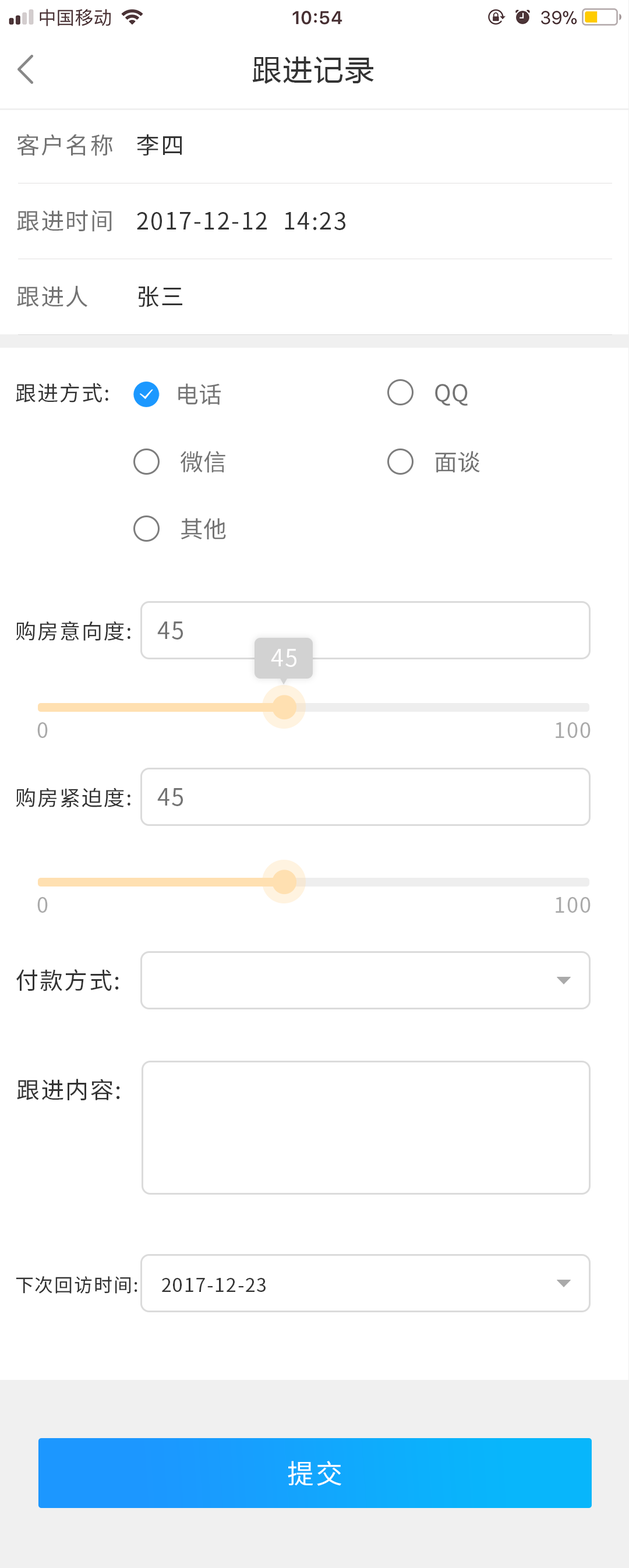
<style>
.page{position:relative;width:629px;height:1568px;background:#ffffff}
.page>*{position:absolute;margin:0}
.t1{font:29.1px "MicrosoftYaHei";letter-spacing:0.06em;color:#333333}
.t2{font:23.3px "SourceHanSansCN-Regular";letter-spacing:0.06em;color:#737373}
.t3{font:23.3px "SourceHanSansCN-Regular";letter-spacing:0.06em;color:#333333}
.t4{font:21px "SourceHanSansCN-Regular";letter-spacing:0.06em;color:#333333}
.t5{font:23.3px "SourceHanSansCN-Regular";color:#737373}
.t6{font:23.3px "SourceHanSansCN-Regular";letter-spacing:0.06em;color:#fffefe}
.t7{font:21px "SourceHanSansCN-Regular";letter-spacing:0.06em;color:#aaaaaa}
.t8{font:18.6px "SourceHanSansCN-Regular";letter-spacing:0.06em;color:#333333}
.t9{font:26.8px "SourceHanSansCN-Regular";letter-spacing:0.06em;color:#ffffff}
</style>
<div class="page">
<p class="t1" style="left:252px;top:56px;width:122px;height:28px">跟进记录</p>
<p class="t2" style="left:17px;top:134px;width:95px;height:22px">客户名称</p>
<p class="t3" style="left:137px;top:134px;width:45px;height:22px">李四</p>
<p class="t2" style="left:17px;top:210px;width:95px;height:22px">跟进时间</p>
<p class="t3" style="left:137px;top:212px;width:208px;height:18px">2017-12-12  14:23</p>
<p class="t2" style="left:17px;top:285px;width:70px;height:22px">跟进人</p>
<p class="t3" style="left:138px;top:286px;width:44px;height:22px">张三</p>
<p class="t4" style="left:16px;top:383px;width:92px;height:19px">跟进方式:</p>
<p class="t5" style="left:178px;top:383px;width:43px;height:22px">电话</p>
<p class="t5" style="left:435px;top:384px;width:33px;height:22px">QQ</p>
<p class="t5" style="left:180px;top:451px;width:45px;height:22px">微信</p>
<p class="t5" style="left:435px;top:451px;width:45px;height:21px">面谈</p>
<p class="t5" style="left:181px;top:518px;width:45px;height:21px">其他</p>
<p class="t4" style="left:16px;top:621px;width:114px;height:20px">购房意向度:</p>
<p class="t2" style="left:157px;top:621px;width:26px;height:19px">45</p>
<p class="t6" style="left:271px;top:649px;width:25px;height:18px">45</p>
<p class="t7" style="left:37px;top:722px;width:11px;height:16px">0</p>
<p class="t7" style="left:556px;top:722px;width:35px;height:16px">100</p>
<p class="t4" style="left:16px;top:787px;width:114px;height:20px">购房紧迫度:</p>
<p class="t2" style="left:157px;top:788px;width:26px;height:18px">45</p>
<p class="t7" style="left:37px;top:897px;width:11px;height:16px">0</p>
<p class="t7" style="left:556px;top:897px;width:35px;height:16px">100</p>
<p class="t3" style="left:16px;top:969px;width:103px;height:22px">付款方式:</p>
<p class="t3" style="left:17px;top:1079px;width:103px;height:21px">跟进内容:</p>
<p class="t8" style="left:16px;top:1276px;width:121px;height:18px">下次回访时间:</p>
<p class="t8" style="left:162px;top:1278px;width:104px;height:14px">2017-12-23</p>
<p class="t9" style="left:288px;top:1461px;width:53px;height:25px">提交</p>
</div>
